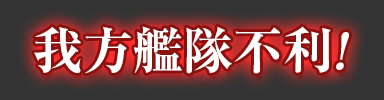
<style>
.page{position:relative;width:384px;height:100px;background:#333333}
.page>*{position:absolute;margin:0}
.t1{font:50px "RyuminPr6N-ExBold";color:#ffffff}
.t2{font:50px "RyuminPr6N-ExBold";color:#ffffff;font-style:italic}
</style>
<div class="page">
<p class="t1" style="left:34px;top:26px;width:315px;height:48px">我方艦隊不利<span class="t2">!</span></p>
</div>
